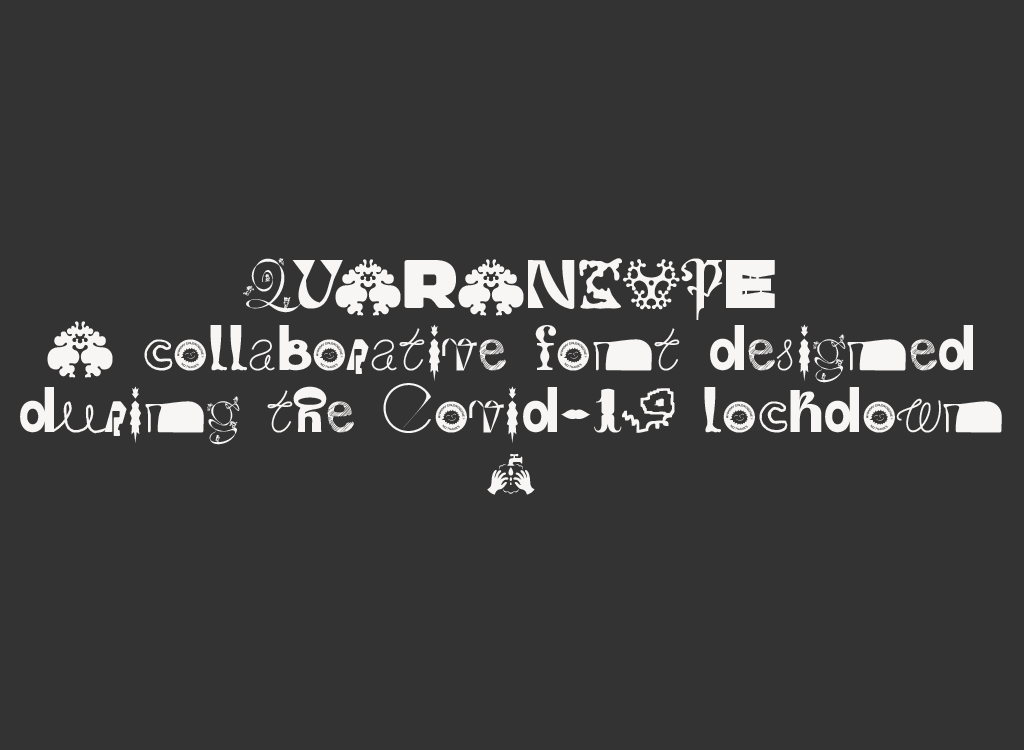
<style>
.page{position:relative;width:1024px;height:750px;background:#333333}
.page>*{position:absolute;margin:0}
.t1{font:60px/62px "Quarantype-Regular";color:#f8f6f5}
</style>
<div class="page">
<p class="t1" style="left:20px;top:258px;width:982px;height:237px;text-align:center">QUARANTYPE<br>A collaborative font designed<br>during the Covid-19 lockdown<br>🧼</p>
</div>
